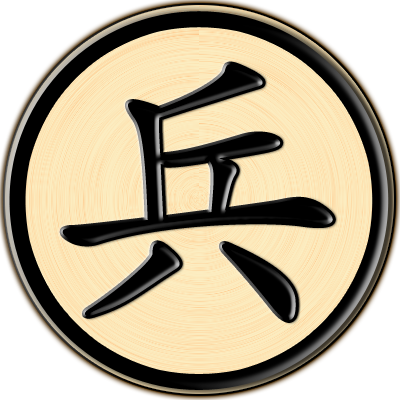
<style>
.page{position:relative;width:400px;height:400px}
.page>*{position:absolute;margin:0}
.t1{font:325px "AdobeKaitiStd-Regular";color:#000000}
</style>
<div class="page">
<p class="t1" style="left:62px;top:64px;width:271px;height:256px">兵</p>
</div>
